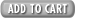
<style>
.page{position:relative;width:97px;height:18px;background:#ffffff}
.page>*{position:absolute;margin:0}
.t1{font:11px "Futura-CondensedBold";letter-spacing:0.025em;color:#ffffff}
</style>
<div class="page">
<p class="t1" style="left:8px;top:4px;width:59px;height:9px">ADD TO CART</p>
</div>
